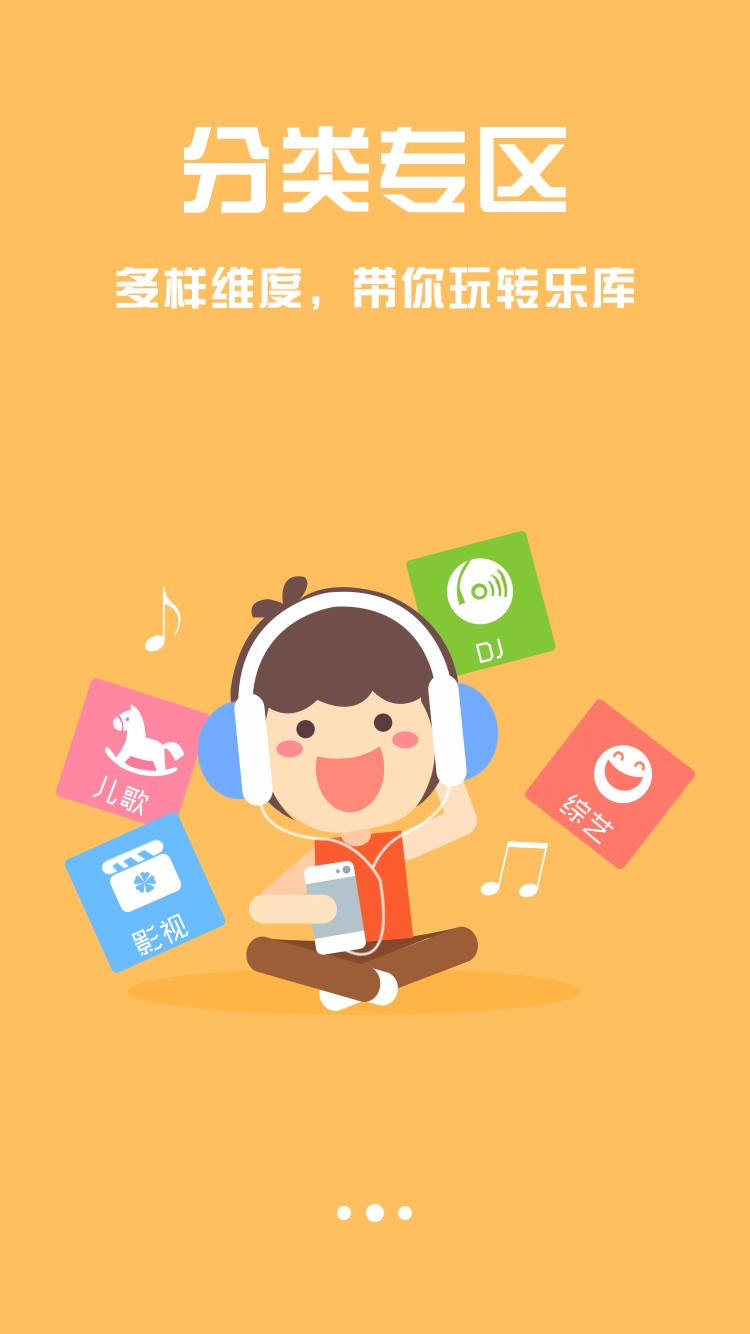
<style>
.page{position:relative;width:750px;height:1334px;background:#ffbf5e}
.page>*{position:absolute;margin:0}
.t1{font:96px "FZZYJW--GB1-0";letter-spacing:0.03em;color:#ffffff}
.t2{font:45.7px "FZZYJW--GB1-0";letter-spacing:0.03em;color:#ffffff}
.t3{font:28.1px "MFShangHei_Noncommercial-Regular";letter-spacing:0.03em;color:#ffffff}
</style>
<div class="page">
<p class="t1" style="left:184px;top:126px;width:382px;height:87px">分类专区</p>
<p class="t2" style="left:116px;top:266px;width:518px;height:44px">多样维度，带你玩转乐库</p>
<p class="t3" style="left:475px;top:638px;width:28px;height:26px;rotate:-14deg">DJ</p>
<p class="t3" style="left:92px;top:775px;width:57px;height:41px;rotate:21deg">儿歌</p>
<p class="t3" style="left:559px;top:794px;width:55px;height:51px;rotate:40deg">综艺</p>
<p class="t3" style="left:131px;top:913px;width:58px;height:43px;rotate:-24deg">影视</p>
</div>
